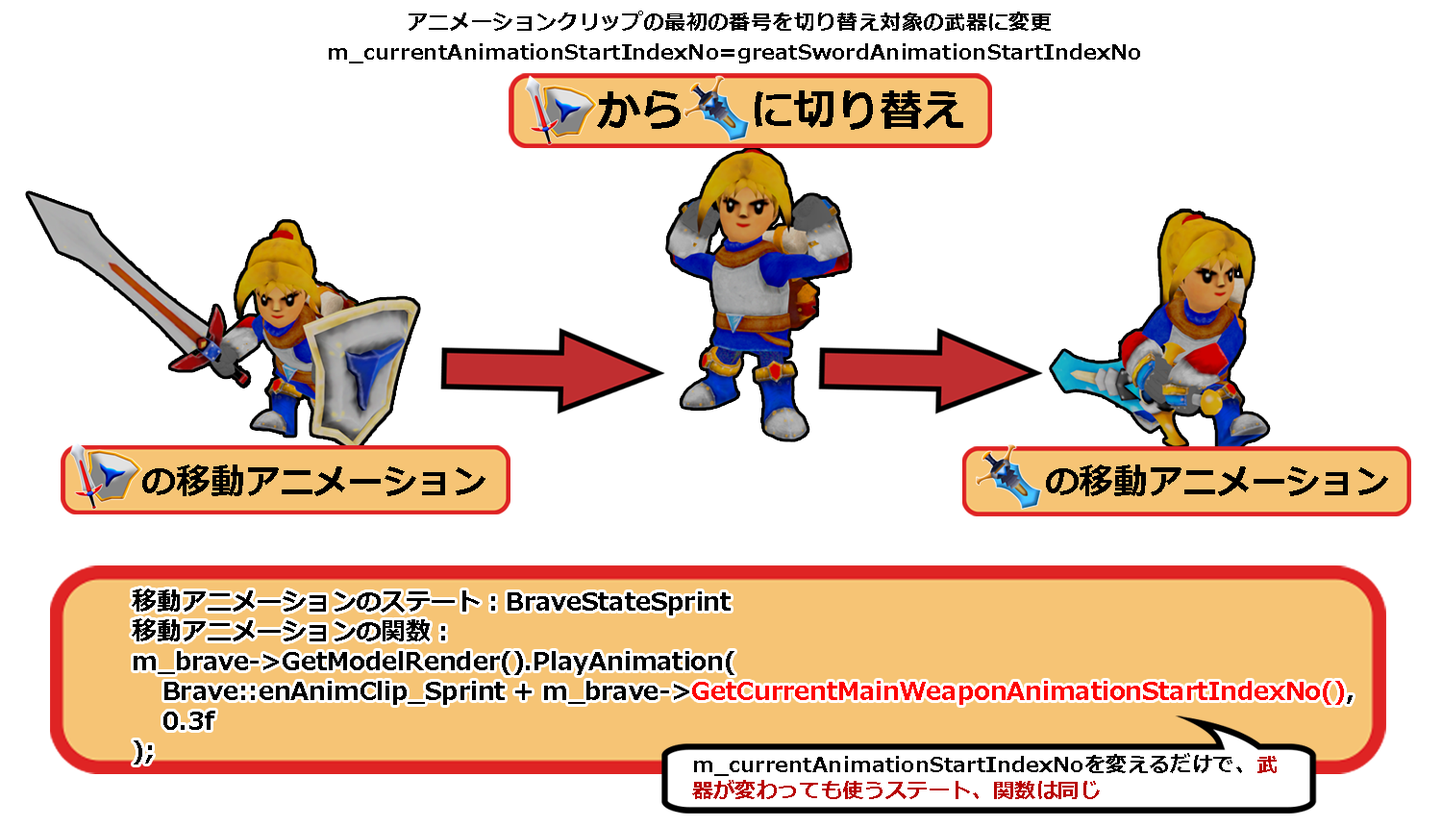
<style>
.page{position:relative;width:1442px;height:827px;background:#ffffff}
.page>*{position:absolute;margin:0}
.t1{font:21.5px "Meiryo-Bold";color:#000000}
.t2{font:43px "Meiryo-Bold";color:#000000}
.t3{font:34.4px "Meiryo-Bold";color:#000000}
.t4{font:24.9px "Meiryo-Bold";color:#000000}
.t5{font:24.9px "Meiryo-Bold";color:#ff0404}
.t6{font:21.5px "Meiryo-Bold";color:#b80202}
</style>
<div class="page">
<p class="t1" style="left:409px;top:11px;width:642px;height:20px">アニメーションクリップの最初の番号を切り替え対象の武器に変更</p>
<p class="t1" style="left:329px;top:43px;width:811px;height:20px">m_currentAnimationStartIndexNo=greatSwordAnimationStartIndexNo</p>
<p class="t2" style="left:597px;top:90px;width:84px;height:39px">から</p>
<p class="t2" style="left:755px;top:90px;width:208px;height:40px">に切り替え</p>
<p class="t3" style="left:142px;top:464px;width:344px;height:32px">の移動アニメーション</p>
<p class="t3" style="left:1046px;top:464px;width:342px;height:32px">の移動アニメーション</p>
<p class="t4" style="left:132px;top:588px;width:1221px;height:176px">移動アニメーションのステート：BraveStateSprint<br>移動アニメーションの関数：<br>m_brave-&gt;GetModelRender().PlayAnimation(<br> Brave::enAnimClip_Sprint + m_brave-&gt;<span class="t5">GetCurrentMainWeaponAnimationStartIndexNo()</span>, <br> 0.3f<br>);</p>
<p class="t1" style="left:692px;top:753px;width:585px;height:46px">m_currentAnimationStartIndexNoを変えるだけで、<span class="t6">武器が変わっても使うステート、関数は同じ</span></p>
</div>
